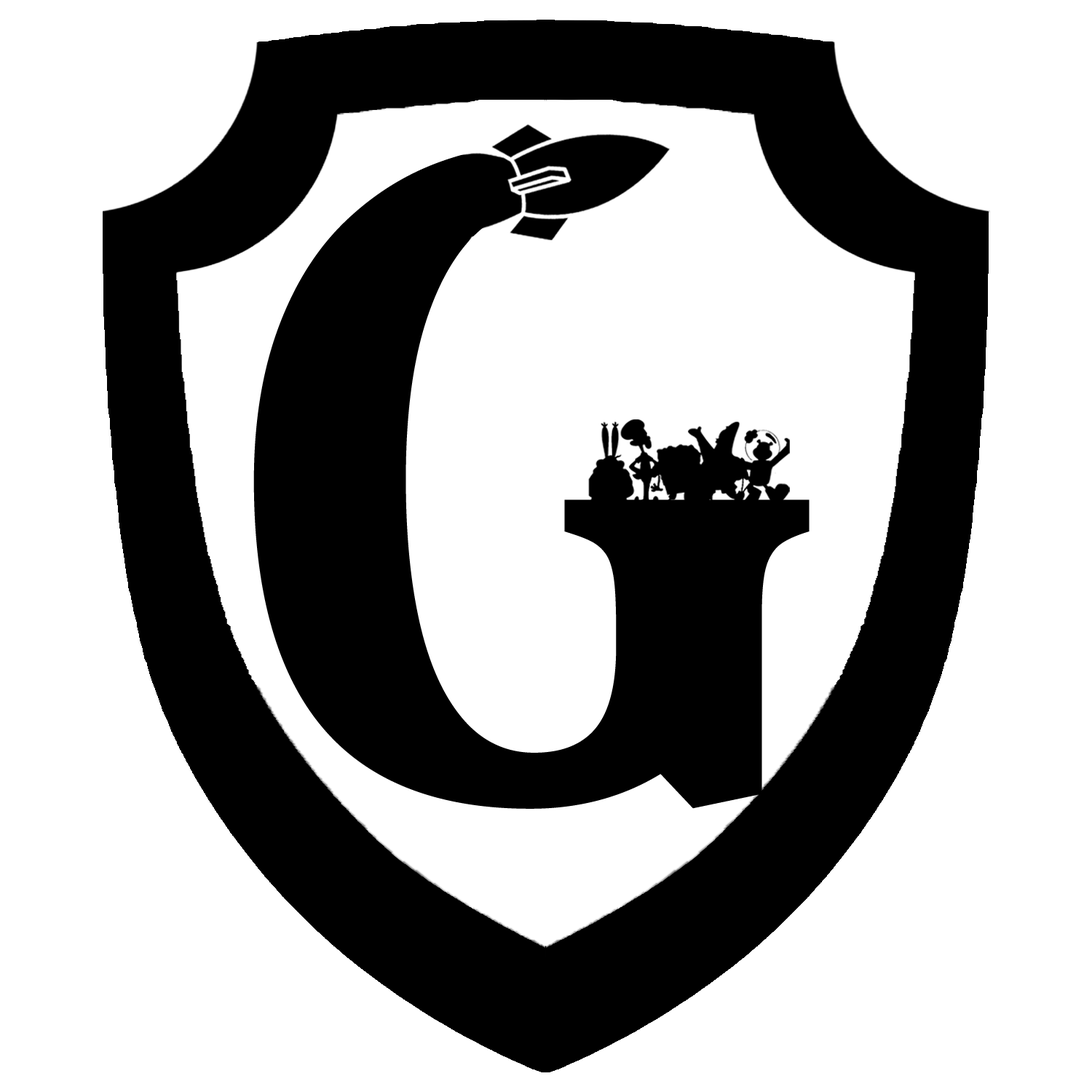
<style>
.page{position:relative;width:1092px;height:1092px;background:#ffffff}
.page>*{position:absolute;margin:0}
.t1{font:977.4px "Cambria-Bold";color:#000000}
</style>
<div class="page">
<p class="t1" style="left:253px;top:142px;width:557px;height:667px">G</p>
</div>
